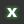
<style>
.page{position:relative;width:24px;height:24px;background:#333333}
.page>*{position:absolute;margin:0}
.t1{font:18px "SegoeUI-Bold";color:#ffffff}
</style>
<div class="page">
<p class="t1" style="left:7px;top:8px;width:10px;height:9px">x</p>
</div>
